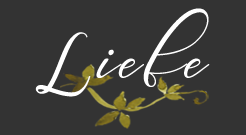
<style>
.page{position:relative;width:246px;height:135px;background:#333333}
.page>*{position:absolute;margin:0}
.t1{font:60px "Nazeefa-Script";letter-spacing:0.07em;color:#ffffff}
</style>
<div class="page">
<p class="t1" style="left:35px;top:8px;width:175px;height:89px">Liebe</p>
</div>
